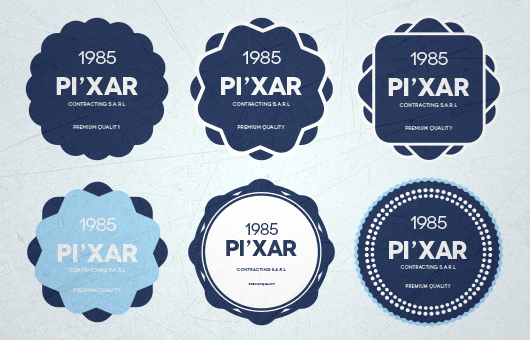
<style>
.page{position:relative;width:530px;height:340px}
.page>*{position:absolute;margin:0}
.t1{font:18.6px "Novecentowide-Normal";letter-spacing:-0.04em;color:#f5f5f5}
.t2{font:25.8px "Novecentowide-Bold";letter-spacing:-0.02em;color:#f5f5f5}
.t3{font:4.8px "Novecentowide-Book";letter-spacing:0.06em}
.t4{font:18.3px "Novecentowide-Normal";letter-spacing:-0.04em;color:#f5f5f5}
.t5{font:17.8px "Novecentowide-Normal";letter-spacing:-0.04em;color:#f5f5f5}
.t6{font:16px "Novecentowide-Normal";letter-spacing:-0.04em;color:#2f3f63}
.t7{font:25.4px "Novecentowide-Bold";letter-spacing:-0.02em;color:#f5f5f5}
.t8{font:22.1px "Novecentowide-Bold";letter-spacing:-0.02em;color:#2f3f63}
.t9{font:24.7px "Novecentowide-Bold";letter-spacing:-0.02em;color:#f5f5f5}
.t10{font:4.2px "Novecentowide-Book";letter-spacing:0.06em}
.t11{font:4.6px "Novecentowide-Book";letter-spacing:0.06em}
.t12{font:4.8px "Novecentowide-Book";letter-spacing:0.06em;color:#f5f5f5}
.t13{font:2.6px "Novecentowide-Book";letter-spacing:0.06em;color:#2f3f63}
</style>
<div class="page">
<p class="t1" style="left:78px;top:51px;width:38px;height:13px">1985</p>
<p class="t1" style="left:242px;top:51px;width:39px;height:13px">1985</p>
<p class="t1" style="left:410px;top:52px;width:38px;height:13px">1985</p>
<p class="t2" style="left:56px;top:77px;width:82px;height:18px">PI’XAR</p>
<p class="t2" style="left:221px;top:77px;width:81px;height:18px">PI’XAR</p>
<p class="t2" style="left:388px;top:78px;width:82px;height:18px">PI’XAR</p>
<p class="t3" style="left:68px;top:102px;width:58px;height:4px">contracting s.a.r.l</p>
<p class="t3" style="left:232px;top:102px;width:58px;height:4px">contracting s.a.r.l</p>
<p class="t3" style="left:399px;top:103px;width:59px;height:4px">contracting s.a.r.l</p>
<p class="t3" style="left:73px;top:125px;width:48px;height:5px">PREMIUM QUALITY</p>
<p class="t3" style="left:237px;top:125px;width:48px;height:5px">PREMIUM QUALITY</p>
<p class="t3" style="left:405px;top:126px;width:48px;height:5px">PREMIUM QUALITY</p>
<p class="t4" style="left:79px;top:218px;width:37px;height:13px">1985</p>
<p class="t5" style="left:410px;top:216px;width:37px;height:13px">1985</p>
<p class="t6" style="left:245px;top:223px;width:33px;height:12px">1985</p>
<p class="t7" style="left:57px;top:244px;width:81px;height:18px">PI’XAR</p>
<p class="t8" style="left:226px;top:240px;width:71px;height:16px">PI’XAR</p>
<p class="t9" style="left:389px;top:241px;width:78px;height:18px">PI’XAR</p>
<p class="t3" style="left:68px;top:268px;width:58px;height:4px">contracting s.a.r.l</p>
<p class="t10" style="left:236px;top:268px;width:50px;height:3px">contracting s.a.r.l</p>
<p class="t11" style="left:400px;top:265px;width:56px;height:4px">contracting s.a.r.l</p>
<p class="t12" style="left:73px;top:288px;width:48px;height:5px">PREMIUM QUALITY</p>
<p class="t13" style="left:248px;top:283px;width:27px;height:3px">PREMIUM QUALITY</p>
<p class="t11" style="left:405px;top:284px;width:46px;height:5px">PREMIUM QUALITY</p>
</div>
